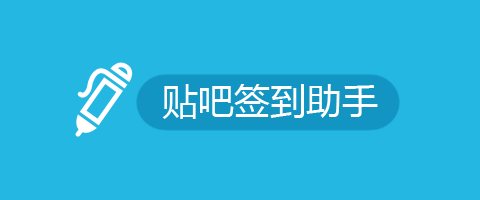
<style>
.page{position:relative;width:480px;height:200px;background:#24b7e2}
.page>*{position:absolute;margin:0}
.t1{font:36px "MicrosoftYaHei";color:#ffffff}
</style>
<div class="page">
<p class="t1" style="left:162px;top:84px;width:216px;height:35px">贴吧签到助手</p>
</div>
